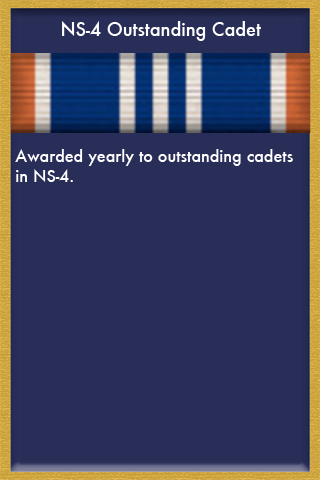
<style>
.page{position:relative;width:320px;height:480px;background:#292e59}
.page>*{position:absolute;margin:0}
.t1{font:18px "Futura-Medium";color:#ffffff}
.t2{font:16px "Futura-Medium";color:#ffffff}
</style>
<div class="page">
<p class="t1" style="left:62px;top:21px;width:199px;height:20px">NS-4 Outstanding Cadet</p>
<p class="t2" style="left:15px;top:149px;width:278px;height:33px">Awarded yearly to outstanding cadets <br>in NS-4.</p>
</div>
